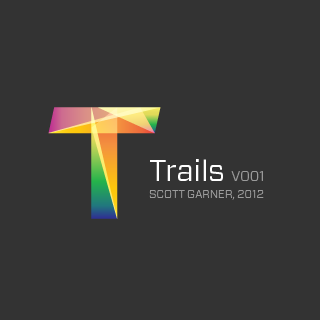
<style>
.page{position:relative;width:320px;height:320px;background:#333333}
.page>*{position:absolute;margin:0}
.t1{font:30px "Forza-Book";color:#ffffff}
.t2{font:14px "Forza-Light";color:#9a9a9a}
.t3{font:11px "Forza-Light";letter-spacing:0.01em;color:#9a9a9a;text-transform:uppercase}
</style>
<div class="page">
<p class="t1" style="left:150px;top:159px;width:73px;height:22px">Trails</p>
<p class="t2" style="left:231px;top:171px;width:32px;height:10px">V001</p>
<p class="t3" style="left:149px;top:190px;width:115px;height:10px">Scott Garner, 2012</p>
</div>
